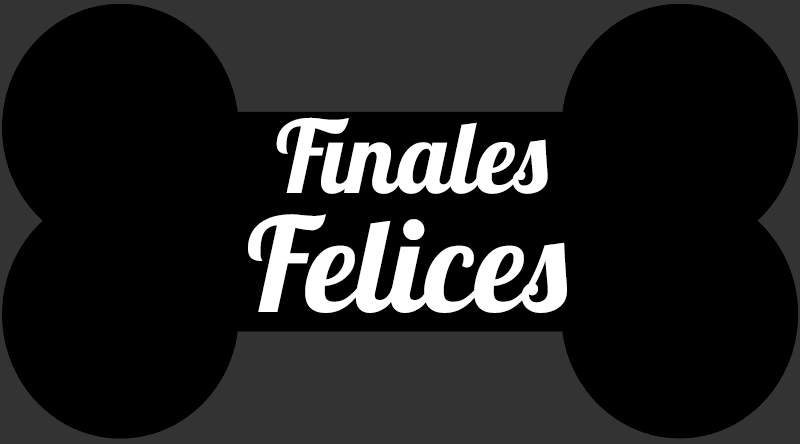
<style>
.page{position:relative;width:800px;height:444px;background:#000000}
.page>*{position:absolute;margin:0}
.t1{font:100px "Lobster-Regular";color:#ffffff}
.t2{font:130px "Lobster-Regular";color:#ffffff}
</style>
<div class="page">
<p class="t1" style="left:276px;top:117px;width:272px;height:77px">Finales</p>
<p class="t2" style="left:248px;top:214px;width:319px;height:99px">Felices</p>
</div>
